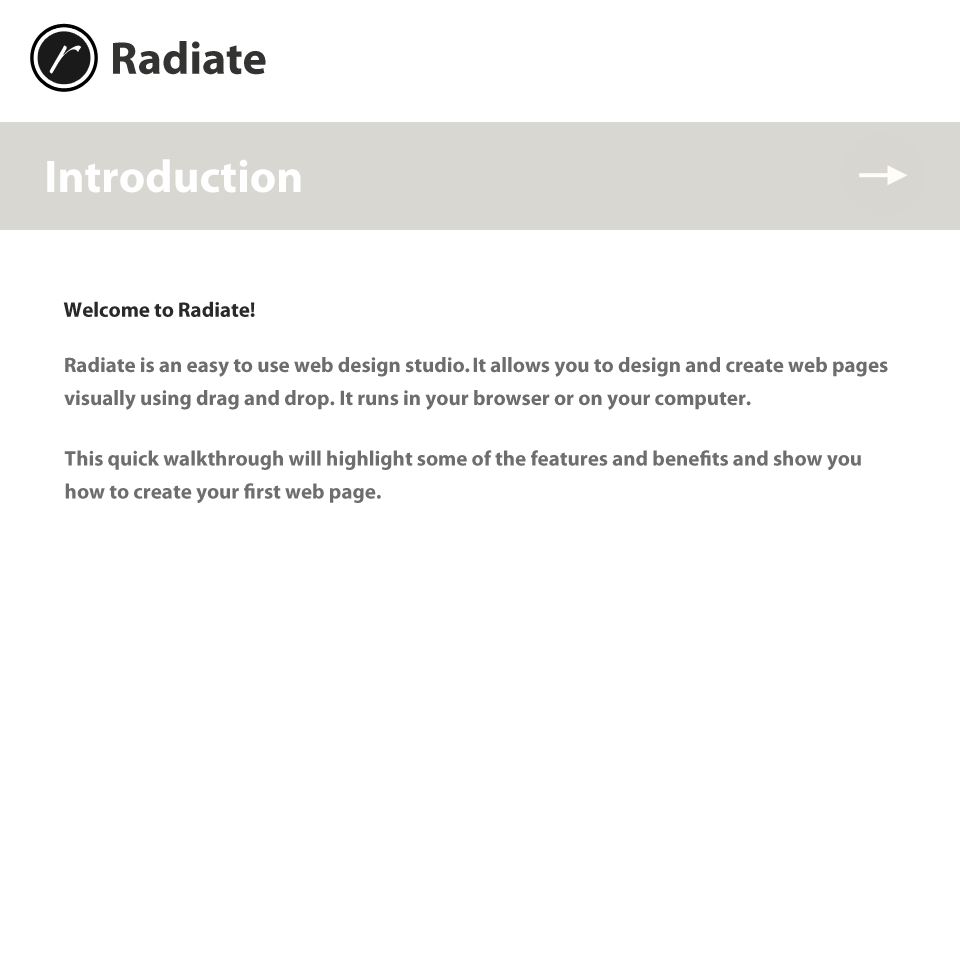
<style>
.page{position:relative;width:960px;height:960px;background:#ffffff}
.page>*{position:absolute;margin:0}
.t1{font:46px "MyriadPro-Bold";color:#333331}
.t2{font:46px "MyriadPro-Bold";color:#ffffff}
.t3{font:21px "MyriadPro-Bold";color:#292929}
.t4{font:21px/33px "MyriadPro-Bold";color:#6d6d6d}
.t5{font:21px/33px "MyriadPro-Bold";color:#6e6e6e}
</style>
<div class="page">
<p class="t1" style="left:113px;top:41px;width:153px;height:34px">Radiate</p>
<p class="t2" style="left:47px;top:159px;width:254px;height:34px">Introduction</p>
<p class="t3" style="left:63px;top:301px;width:192px;height:16px">Welcome to Radiate!</p>
<p class="t4" style="left:64px;top:357px;width:824px;height:53px">Radiate is an easy to use web design studio. It allows you to design and create web pages <br>visually using drag and drop. It runs in your browser or on your computer.</p>
<p class="t5" style="left:64px;top:450px;width:797px;height:54px">This quick walkthrough will highlight some of the features and benefits and show you <br>how to create your first web page.</p>
</div>
